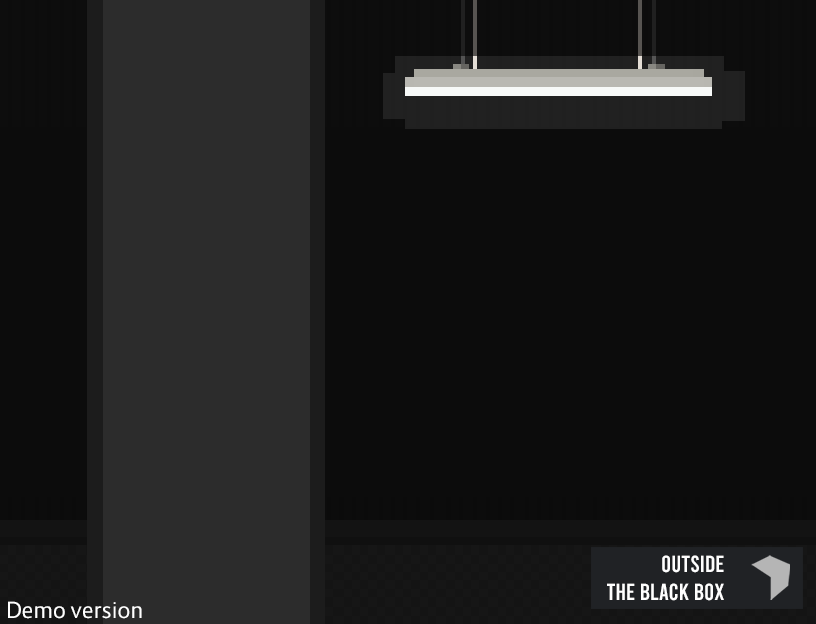
<style>
.page{position:relative;width:816px;height:624px;background:#0c0c0c}
.page>*{position:absolute;margin:0}
.t1{font:23.3px "Bebas-Regular";color:#ffffff}
.t2{font:22px "Route159-Regular";color:#ffffff}
</style>
<div class="page">
<p class="t1" style="left:607px;top:555px;width:117px;height:46px;text-align:right">OUTSIDE<br>THE BLACK BOX</p>
<p class="t2" style="left:8px;top:601px;width:134px;height:18px">Demo version</p>
</div>
